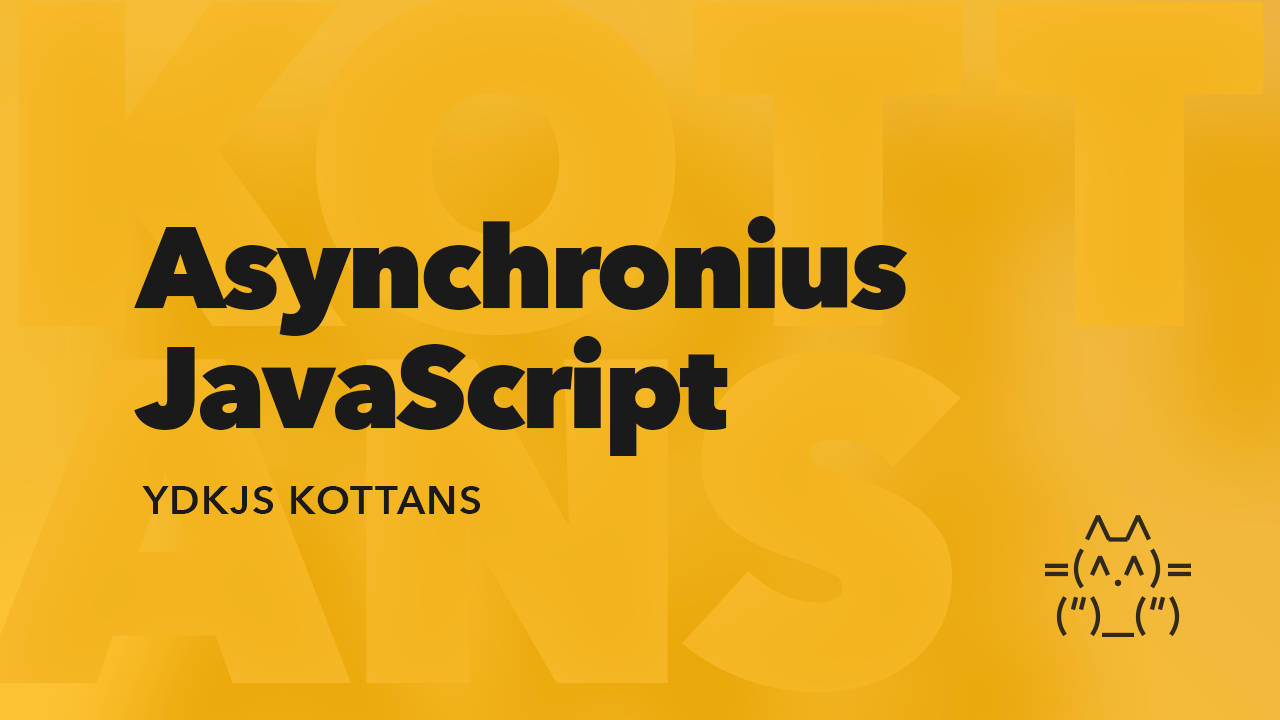
<style>
.page{position:relative;width:1280px;height:720px}
.page>*{position:absolute;margin:0}
.t1{font:115px/120px "AvenirNext-Heavy";letter-spacing:-0.03em;color:#1a1a1a}
.t2{font:40px "AvenirNext-DemiBold";letter-spacing:0.04em;color:#1a1a1a;text-transform:uppercase}
</style>
<div class="page">
<p class="t1" style="left:134px;top:216px;width:774px;height:240px">Asynchronius<br>JavaScript</p>
<p class="t2" style="left:142px;top:486px;width:338px;height:28px">YDKJS Kottans</p>
</div>
